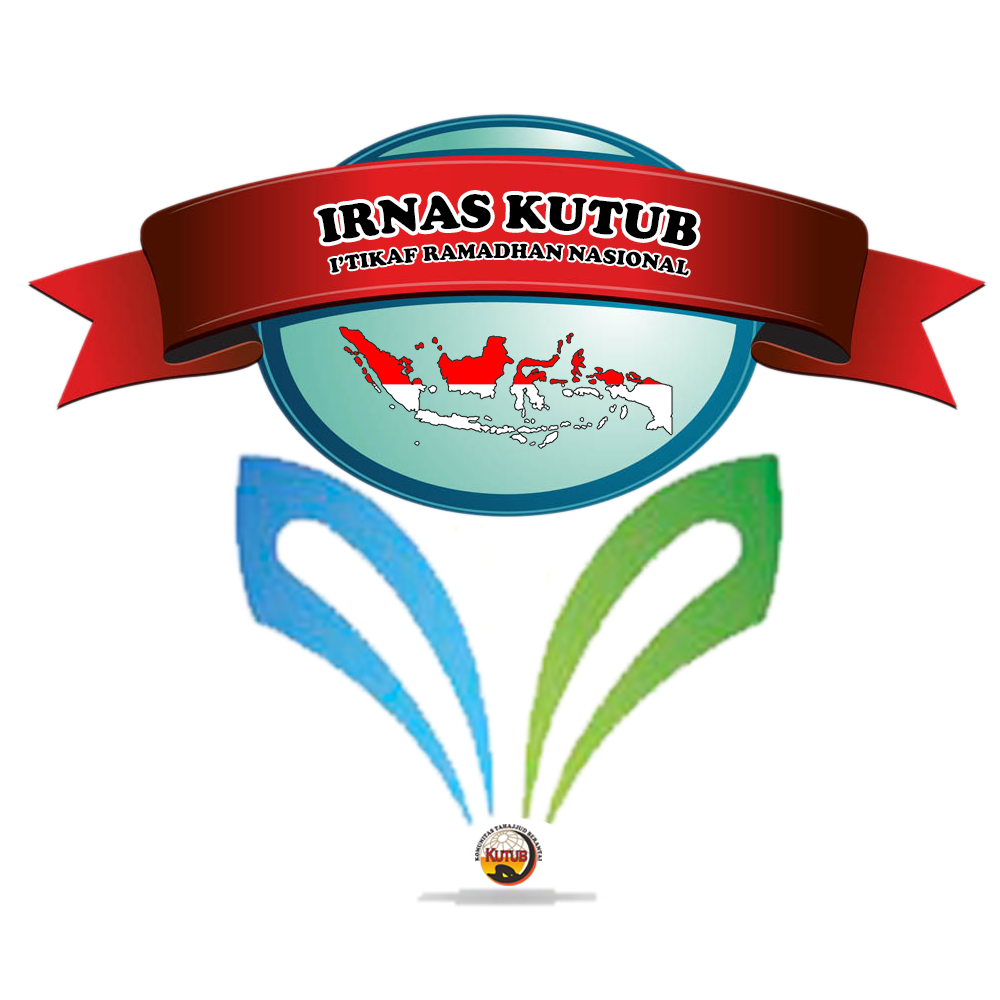
<style>
.page{position:relative;width:1000px;height:1000px;background:#ffffff}
.page>*{position:absolute;margin:0}
.t1{font:49.4px "CooperBlack";color:#000000;text-transform:uppercase}
.t2{font:21.2px "CooperBlack";color:#000000;text-transform:uppercase}
</style>
<div class="page">
<p class="t1" style="left:317px;top:194px;width:380px;height:52px">IRNAS KUTUB</p>
<p class="t2" style="left:329px;top:243px;width:360px;height:33px">I’tikaf ramadhan nasional</p>
</div>
